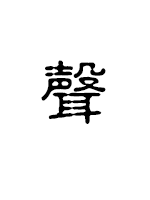
<style>
.page{position:relative;width:150px;height:200px;background:#ffffff}
.page>*{position:absolute;margin:0}
.t1{font:72px "DFGuYin-W5-WINP-BF";letter-spacing:0.04em;color:#000000}
</style>
<div class="page">
<p class="t1" style="left:41px;top:60px;width:65px;height:64px">聲</p>
</div>
